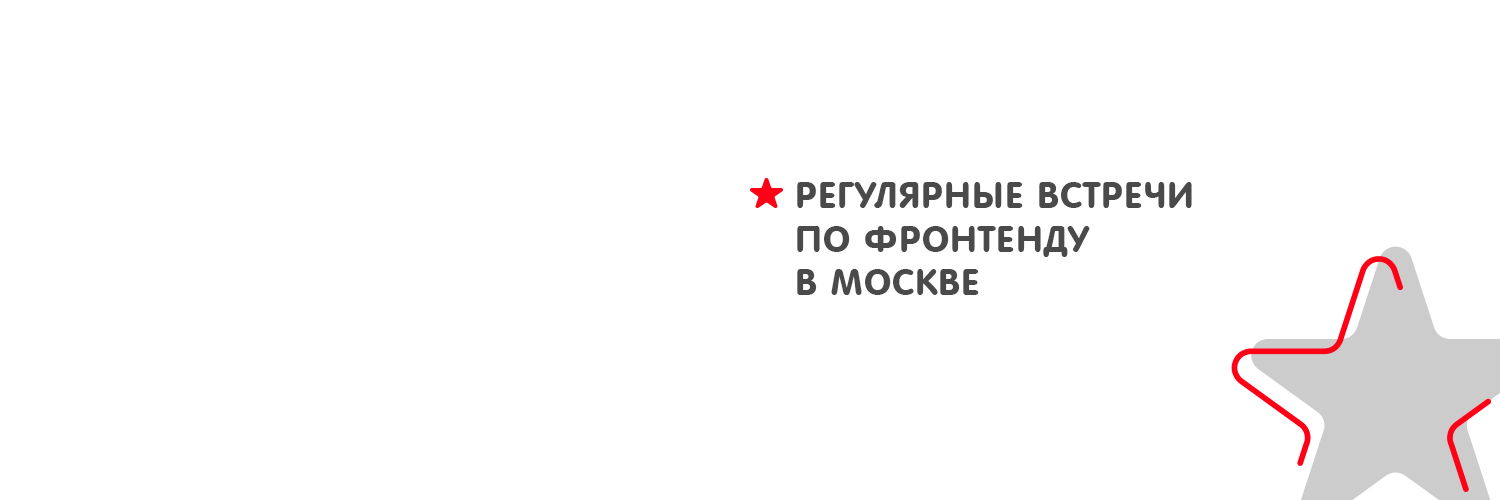
<style>
.page{position:relative;width:1500px;height:500px;background:#ffffff}
.page>*{position:absolute;margin:0}
.t1{font:36.2px "VAGRoundedTL-Regular";letter-spacing:0.03em;color:#4a4a4a;text-transform:uppercase}
</style>
<div class="page">
<p class="t1" style="left:797px;top:182px;width:395px;height:113px">Регулярные встречи<br>по фронтенду<br>в москве</p>
</div>
